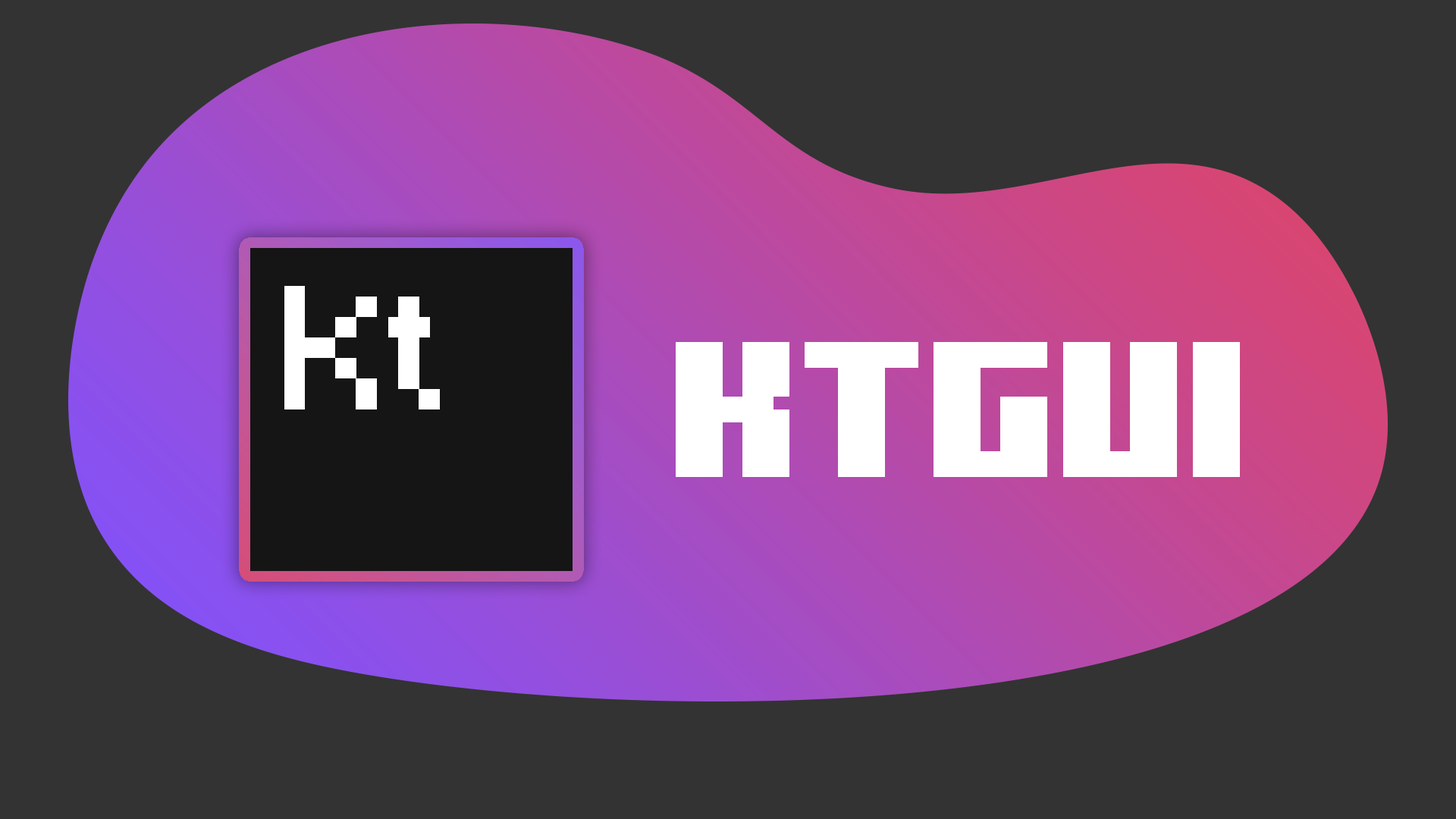
<style>
.page{position:relative;width:1456px;height:819px;background:#333333}
.page>*{position:absolute;margin:0}
.t1{font:192.7px "MinecraftFiftySolid";letter-spacing:0.01em;color:#ffffff}
</style>
<div class="page">
<p class="t1" style="left:676px;top:342px;width:564px;height:135px">KtGui</p>
</div>
